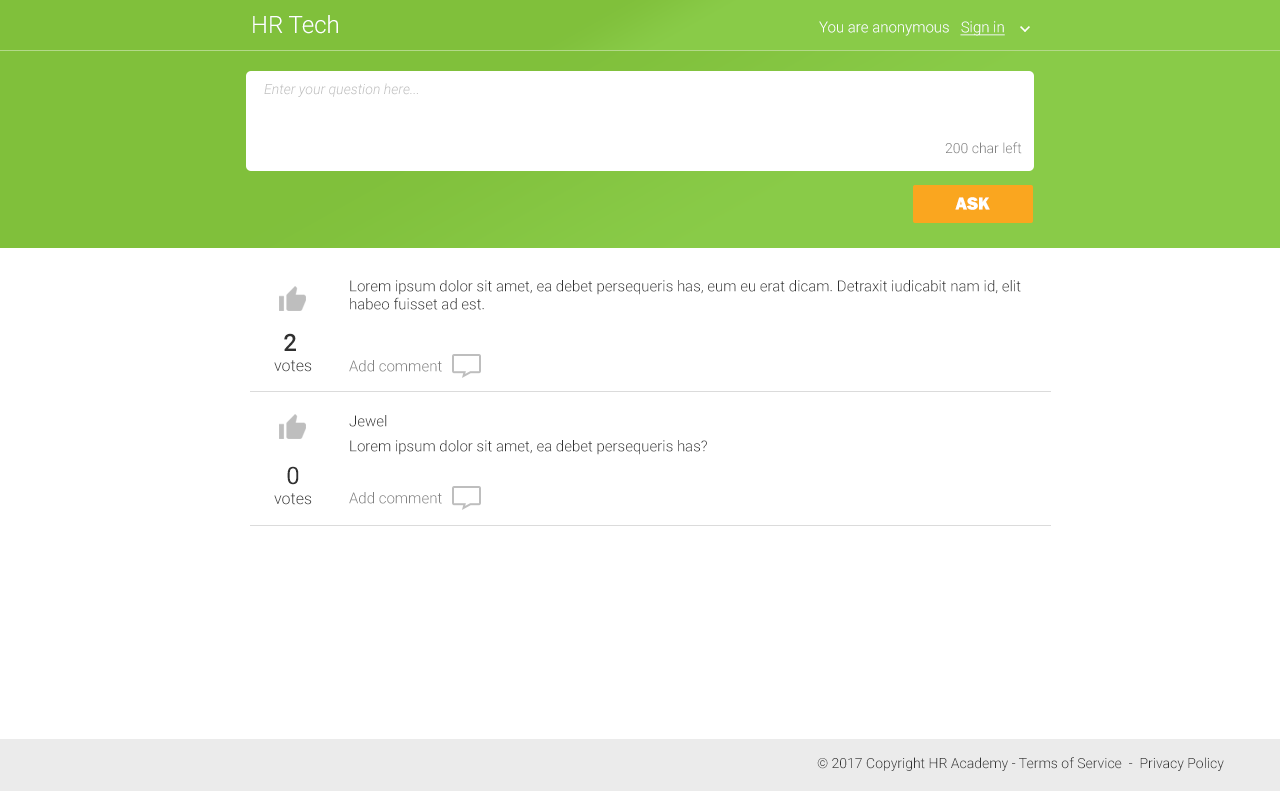
<style>
.page{position:relative;width:1280px;height:792px;background:#ffffff}
.page>*{position:absolute;margin:0}
.t1{font:24px "Roboto-Light";color:#ffffff}
.t2{font:15px "Roboto-Light";color:#ffffff}
.t3{font:15px "Roboto-Light";color:#ffffff;text-decoration:underline}
.t4{font:14px "Roboto-LightItalic";color:#bebebe}
.t5{font:14px "Roboto-Light";color:#828282}
.t6{font:18px "FranklinGothic-Heavy";color:#ffffff;text-transform:uppercase}
.t7{font:15px "Roboto-Light";color:#303030}
.t8{font:16px/20px "Roboto-Light";color:#303030}
.t9{font:24px/20px "Roboto-Medium";color:#303030}
.t10{font:15px "Roboto-Light";color:#808080}
.t11{font:24px/20px "Roboto-Regular";color:#303030}
.t12{font:14px "Roboto-Light";color:#303030}
</style>
<div class="page">
<p class="t1" style="left:253px;top:15px;width:85px;height:19px">HR Tech</p>
<p class="t2" style="left:819px;top:21px;width:186px;height:15px">You are anonymous   <span class="t3">Sign in</span></p>
<p class="t4" style="left:264px;top:83px;width:154px;height:14px">Enter your question here...</p>
<p class="t5" style="left:945px;top:142px;width:77px;height:12px">200 char left</p>
<p class="t6" style="left:955px;top:197px;width:35px;height:13px">ASK</p>
<p class="t7" style="left:350px;top:280px;width:671px;height:30px">Lorem ipsum dolor sit amet, ea debet persequeris has, eum eu erat dicam. Detraxit iudicabit nam id, elit habeo fuisset ad est.</p>
<p class="t8" style="left:274px;top:333px;width:38px;height:39px;text-align:center"><span class="t9">2 <br></span>votes</p>
<p class="t10" style="left:349px;top:360px;width:93px;height:12px">Add comment</p>
<p class="t7" style="left:349px;top:415px;width:38px;height:12px">Jewel</p>
<p class="t7" style="left:350px;top:440px;width:357px;height:15px">Lorem ipsum dolor sit amet, ea debet persequeris has?</p>
<p class="t8" style="left:274px;top:466px;width:38px;height:39px;text-align:center"><span class="t11">0<br></span>votes</p>
<p class="t10" style="left:349px;top:492px;width:93px;height:12px">Add comment</p>
<p class="t12" style="left:817px;top:757px;width:407px;height:14px">© 2017 Copyright HR Academy - Terms of Service  -  Privacy Policy</p>
</div>
